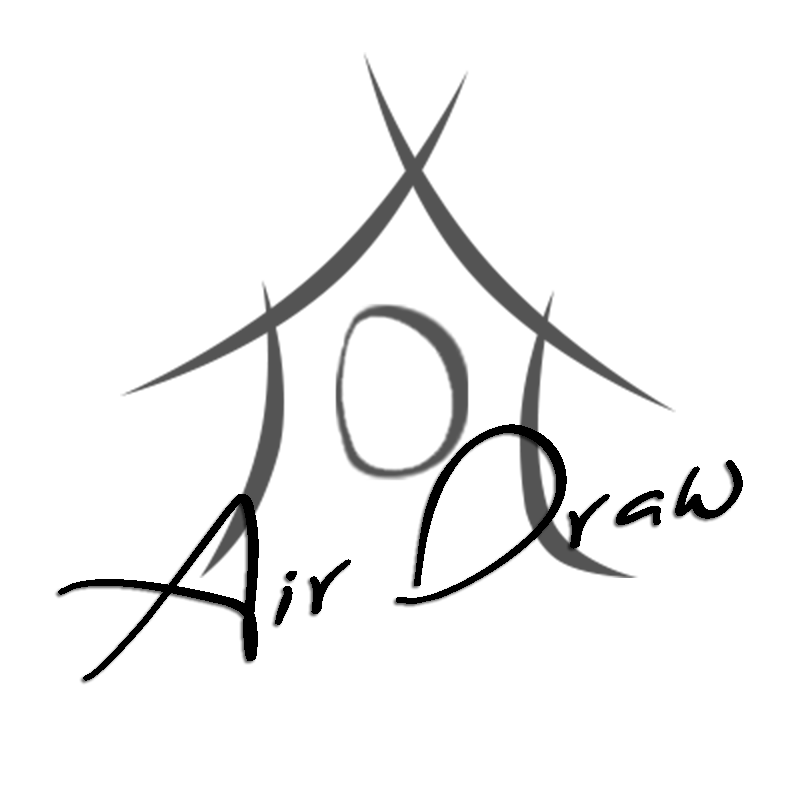
<style>
.page{position:relative;width:800px;height:800px;background:#ffffff}
.page>*{position:absolute;margin:0}
.t1{font:165px "SweetlyBroken";letter-spacing:0.015em;color:#000000;font-weight:bold;font-style:italic;scale:1.4 1}
</style>
<div class="page">
<p class="t1" style="left:58px;top:424px;width:685px;height:257px;rotate:-14deg">Air Draw</p>
</div>
